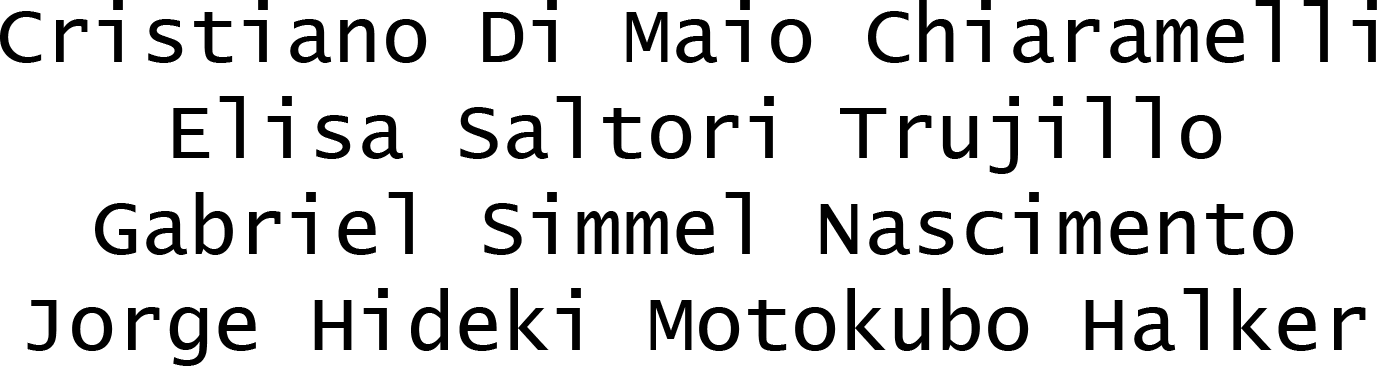
<style>
.page{position:relative;width:1377px;height:366px;background:#ffffff}
.page>*{position:absolute;margin:0}
.t1{font:80px "LucidaConsole";color:#000000}
</style>
<div class="page">
<p class="t1" style="left:0px;top:0px;width:1377px;height:366px;text-align:center">Cristiano Di Maio Chiaramelli<br>Elisa Saltori Trujillo<br>Gabriel Simmel Nascimento<br>Jorge Hideki Motokubo Halker</p>
</div>
